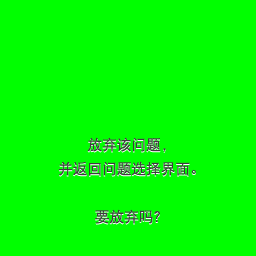
<style>
.page{position:relative;width:256px;height:256px;background:#00ff00}
.page>*{position:absolute;margin:0}
.t1{font:14.7px/24px "DFPHeiW5-GB";color:#3c3c3c}
</style>
<div class="page">
<p class="t1" style="left:59px;top:137px;width:137px;height:87px;text-align:center">放弃该问题，<br>并返回问题选择界面。<br><br>要放弃吗？</p>
</div>
